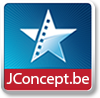
<style>
.page{position:relative;width:100px;height:98px}
.page>*{position:absolute;margin:0}
.t1{font:16px "MyriadPro-Regular";color:#ffffff}
</style>
<div class="page">
<p class="t1" style="left:6px;top:72px;width:83px;height:15px">JConcept.be</p>
</div>
